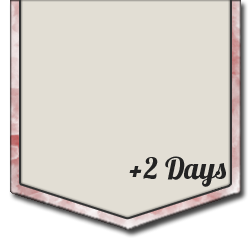
<style>
.page{position:relative;width:251px;height:242px;background:#e2ded4}
.page>*{position:absolute;margin:0}
.t1{font:30px "Lobster1.3";color:#232323}
</style>
<div class="page">
<p class="t1" style="left:129px;top:156px;width:97px;height:31px">+2 Days</p>
</div>
